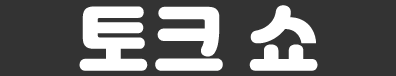
<style>
.page{position:relative;width:396px;height:76px;background:#333333}
.page>*{position:absolute;margin:0}
.t1{font:72px "Jalnan";letter-spacing:0.05em;color:#ffffff;text-transform:uppercase}
</style>
<div class="page">
<p class="t1" style="left:79px;top:5px;width:239px;height:66px">토크 쇼</p>
</div>
